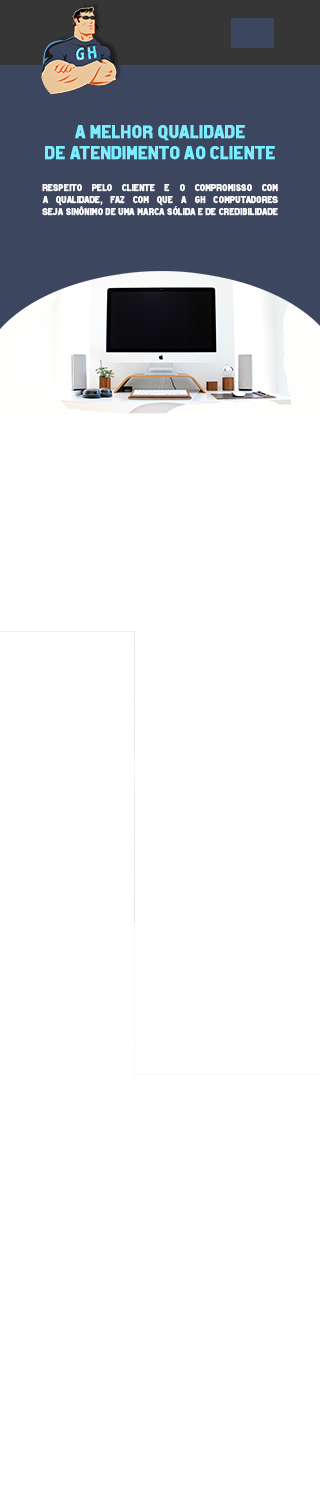
<style>
.page{position:relative;width:320px;height:1500px;background:#ffffff}
.page>*{position:absolute;margin:0}
.t1{font:18px "HotelDeParisXe";color:#7cedff;font-weight:bold}
.t2{font:9.9px "HotelDeParisXe";color:#f6f6f6;font-weight:bold;scale:0.92 1}
</style>
<div class="page">
<p class="t1" style="left:45px;top:125px;width:230px;height:35px;text-align:center">A melhor qualidade<br>de atendimento ao cliente</p>
<p class="t2" style="left:42px;top:184px;width:236px;height:32px;text-align:justify">respeito pelo cliente e o compromisso com <br>a qualidade, faz com que a GH Computadores<br>seja sinônimo de uma marca sólida e de credibilidade</p>
</div>
